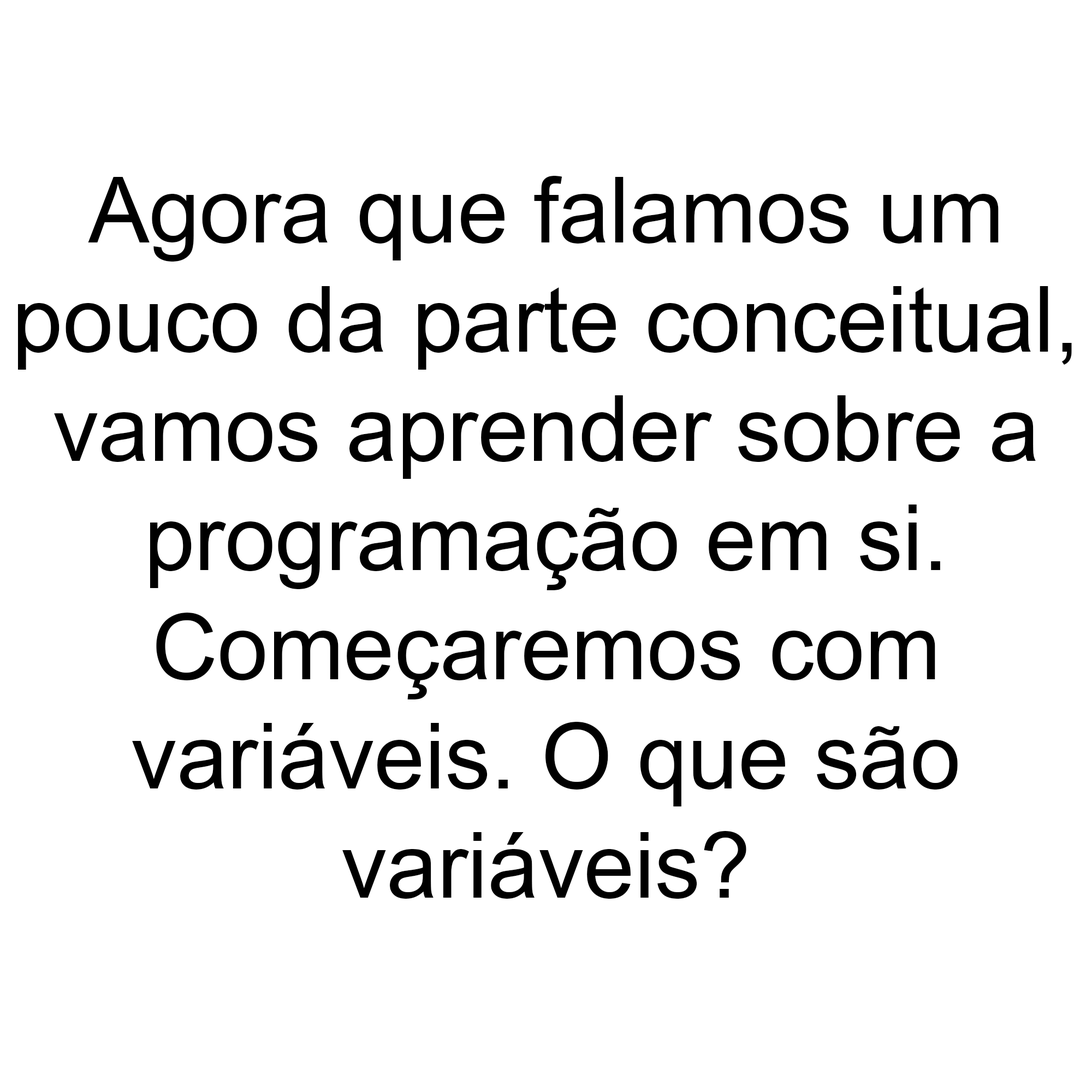
<style>
.page{position:relative;width:1092px;height:1092px;background:#ffffff}
.page>*{position:absolute;margin:0}
.t1{font:91px "ArialMT";color:#000000}
</style>
<div class="page">
<p class="t1" style="left:17px;top:176px;width:1055px;height:723px;text-align:center">Agora que falamos um<br>pouco da parte conceitual,<br>vamos aprender sobre a<br>programação em si.<br>Começaremos com<br>variáveis. O que são<br>variáveis?</p>
</div>
